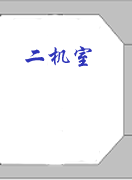
<style>
.page{position:relative;width:132px;height:180px;background:#ffffff}
.page>*{position:absolute;margin:0}
.t1{font:24px "STXingkai";color:#2e34b9}
</style>
<div class="page">
<p class="t1" style="left:25px;top:46px;width:67px;height:21px">二机室</p>
</div>
